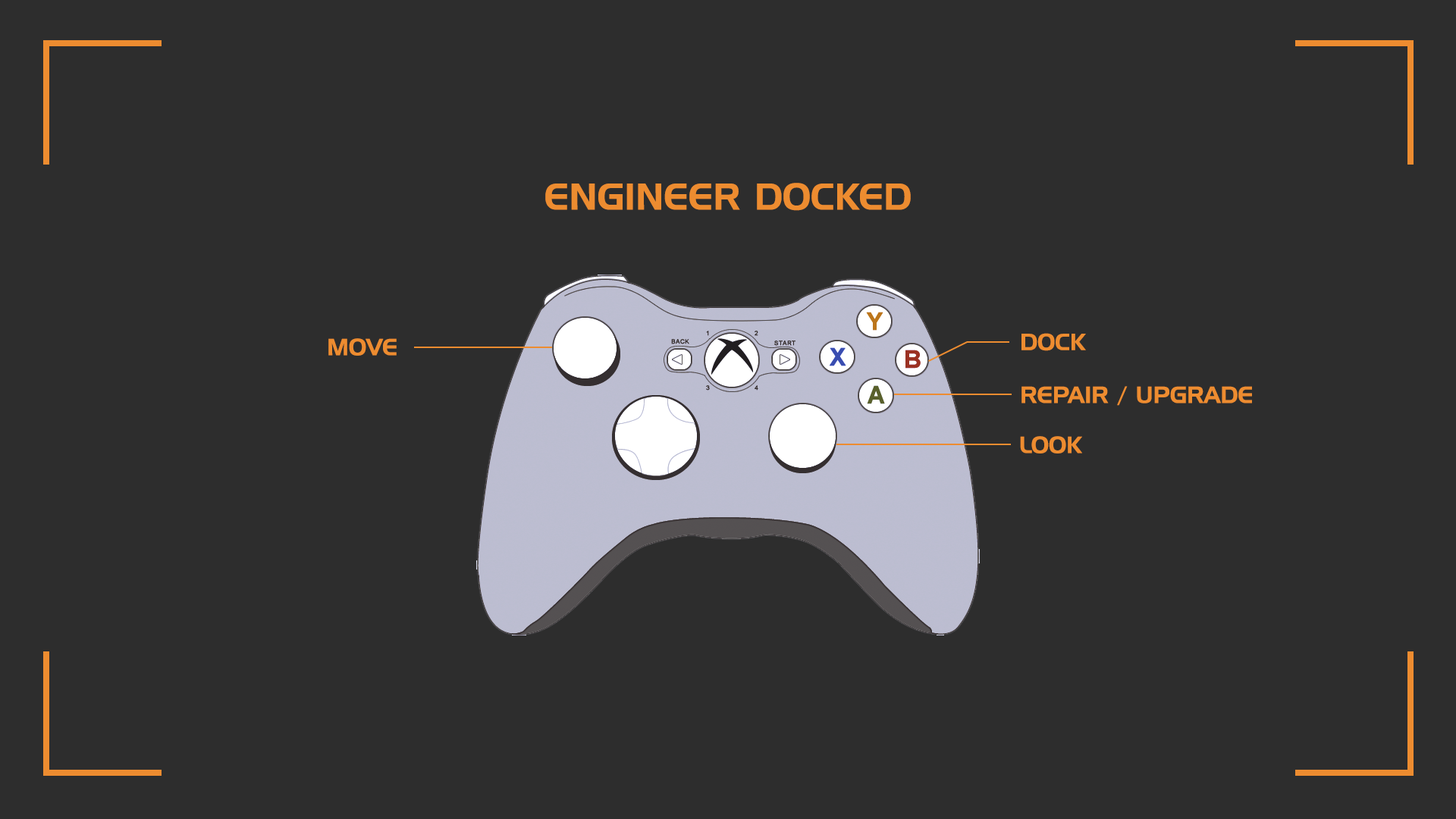
<style>
.page{position:relative;width:1456px;height:819px;background:#2d2d2d}
.page>*{position:absolute;margin:0}
.t1{font:36.4px "HandelGothicBT-Regular";color:#ed8c30}
.t2{font:22.8px "HandelGothicBT-Regular";color:#ed8c30}
.t3{font:22.6px "HandelGothicBT-Regular";color:#ed8c30}
</style>
<div class="page">
<p class="t1" style="left:545px;top:183px;width:366px;height:28px">ENGINEER DOCKED</p>
<p class="t2" style="left:328px;top:338px;width:69px;height:18px">MOVE</p>
<p class="t3" style="left:1021px;top:333px;width:65px;height:18px">DOCK</p>
<p class="t2" style="left:1021px;top:386px;width:231px;height:20px">REPAIR / UPGRADE</p>
<p class="t2" style="left:1020px;top:436px;width:62px;height:17px">LOOK</p>
</div>
